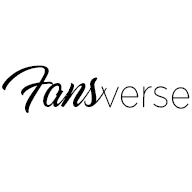
<style>
.page{position:relative;width:192px;height:192px;background:#ffffff}
.page>*{position:absolute;margin:0}
.t1{font:40.3px "Gotham-Thin";color:#000000;scale:0.89 1}
.t2{font:40.3px "Marguerite";color:#000000;scale:0.89 1}
</style>
<div class="page">
<p class="t1" style="left:2px;top:65px;width:188px;height:48px"><span class="t2">Fans</span>verse</p>
</div>
